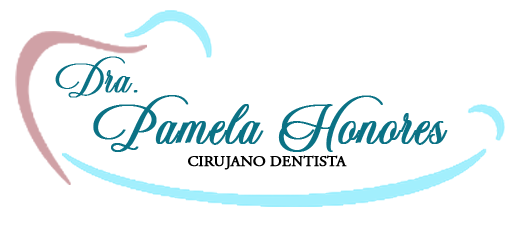
<style>
.page{position:relative;width:527px;height:227px;background:#ffffff}
.page>*{position:absolute;margin:0}
.t1{font:41.2px "Nathalia";color:#0b7285;font-weight:bold}
.t2{font:55.9px "Nathalia";color:#0b7285;font-weight:bold}
.t3{font:15.1px "AGaramondPro-Regular";color:#000000;font-weight:bold}
</style>
<div class="page">
<p class="t1" style="left:55px;top:56px;width:83px;height:42px">Dra.</p>
<p class="t2" style="left:93px;top:95px;width:355px;height:57px">Pamela Honores</p>
<p class="t3" style="left:188px;top:155px;width:159px;height:15px">CIRUJANO DENTISTA</p>
</div>
